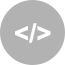
<style>
.page{position:relative;width:65px;height:65px;background:#b2b2b2}
.page>*{position:absolute;margin:0}
.t1{font:26px "Arial-BoldMT";color:#ffffff}
</style>
<div class="page">
<p class="t1" style="left:15px;top:23px;width:36px;height:20px">&lt;/&gt;</p>
</div>
